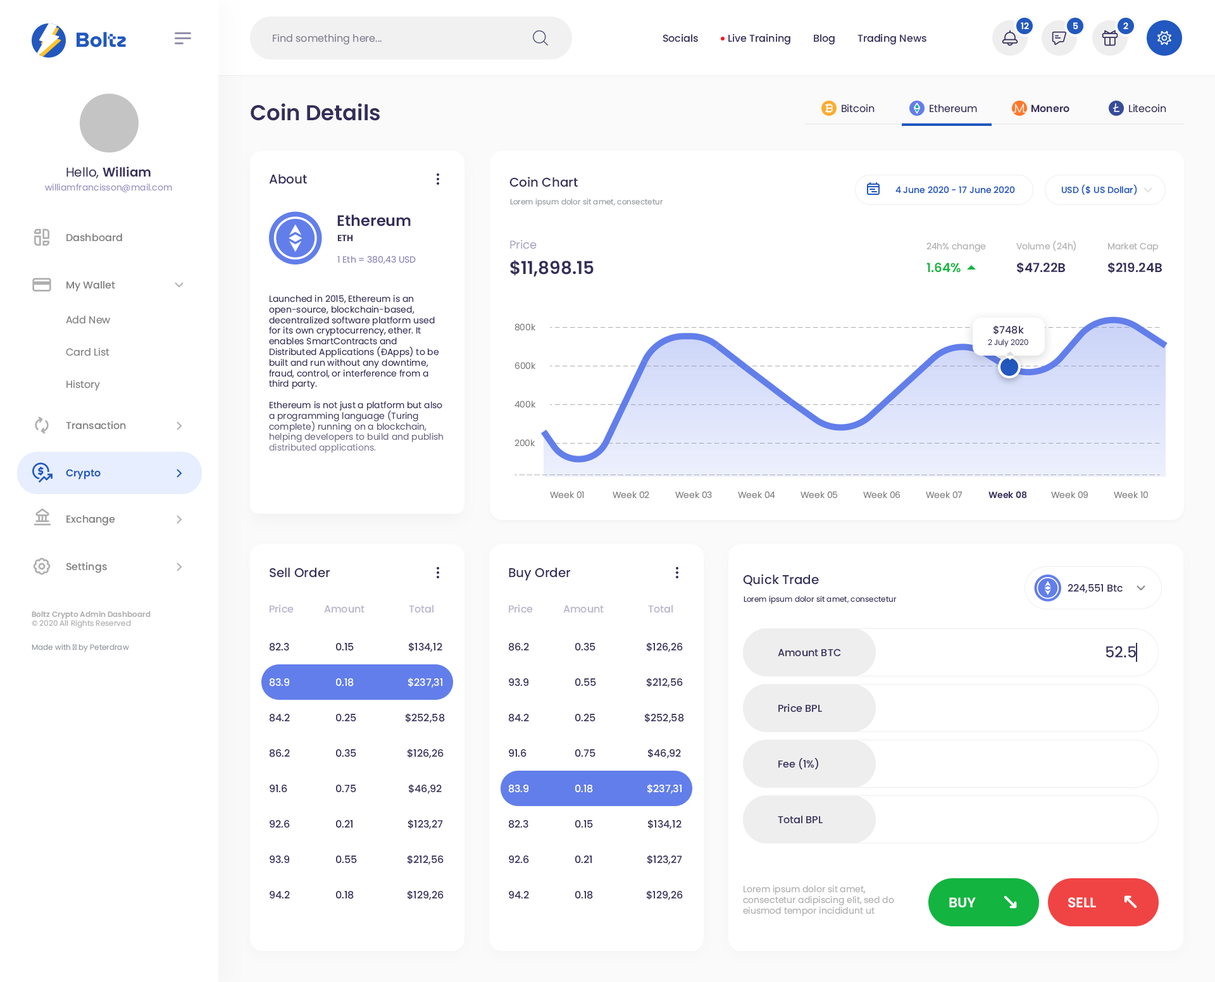
<style>
.page{position:relative;width:1215px;height:982px;background:#ffffff}
.page>*{position:absolute;margin:0}
.t1{font:8.9px "Poppins-SemiBold";color:#ffffff}
.t2{font:10.1px "Poppins-Regular";color:#868295}
.t3{font:10.1px "Poppins-Medium";color:#342e59}
.t4{font:21.5px "Poppins-SemiBold";color:#342e59}
.t5{font:10.1px "Poppins-Regular";color:#342e59}
.t6{font:10.1px "Poppins-SemiBold";color:#342e59}
.t7{font:12.7px "Poppins-SemiBold";color:#342e59}
.t8{font:12.7px "Poppins-Regular";color:#342e59}
.t9{font:12.7px "Poppins-Medium";color:#342e59}
.t10{font:8.9px "Poppins-Regular";color:#9b94c1}
.t11{font:8.9px "Poppins-Medium";color:#2258bf}
.t12{font:7.6px "Poppins-Regular";color:#969ba0}
.t13{font:15.2px "Poppins-SemiBold";color:#342e59}
.t14{font:10.1px "Poppins-Medium";color:#818181}
.t15{font:8.9px "Poppins-SemiBold";color:#342e59}
.t16{font:11.4px "Poppins-Regular";color:#a6a1c0}
.t17{font:8.9px "Poppins-Regular";color:#afafaf}
.t18{font:8.9px "Poppins-Regular";color:#8c84b5}
.t19{font:17.7px "Poppins-SemiBold";color:#342e59}
.t20{font:12.7px "Poppins-SemiBold";color:#13b440}
.t21{font:8.9px "Poppins-Regular";color:#342e59}
.t22{font:10.1px "Poppins-Regular";color:#818181}
.t23{font:8.9px "Poppins-Regular";color:#818181}
.t24{font:7.6px "Poppins-Light";color:#342e59}
.t25{font:10.1px "Poppins-SemiBold";color:#2258bf}
.t26{font:10.1px "Poppins-Medium";color:#b9b5cb}
.t27{font:7.6px "Poppins-Regular";color:#342e59}
.t28{font:7.6px "Poppins-SemiBold";color:#afafaf}
.t29{font:7.6px "Poppins-Regular";color:#afafaf}
.t30{font:15.2px "Poppins-Medium";color:#342e59}
.t31{font:10.1px "Poppins-Medium";color:#fbfbfb}
.t32{font:10.1px "Poppins-Medium";color:#ffffff}
.t33{font:13.9px "Poppins-SemiBold";color:#ffffff}
</style>
<div class="page">
<p class="t1" style="left:1020px;top:22px;width:9px;height:8px">12</p>
<p class="t1" style="left:1073px;top:22px;width:5px;height:8px">5</p>
<p class="t1" style="left:1123px;top:22px;width:5px;height:7px">2</p>
<p class="t2" style="left:273px;top:34px;width:108px;height:11px">Find something here...</p>
<p class="t3" style="left:663px;top:34px;width:35px;height:8px">Socials</p>
<p class="t3" style="left:728px;top:34px;width:62px;height:11px">Live Training</p>
<p class="t3" style="left:814px;top:34px;width:20px;height:11px">Blog</p>
<p class="t3" style="left:857px;top:34px;width:69px;height:11px">Trading News</p>
<p class="t4" style="left:251px;top:103px;width:129px;height:18px">Coin Details</p>
<p class="t5" style="left:841px;top:104px;width:33px;height:9px">Bitcoin</p>
<p class="t5" style="left:929px;top:104px;width:48px;height:9px">Ethereum</p>
<p class="t6" style="left:1031px;top:104px;width:38px;height:9px">Monero</p>
<p class="t5" style="left:1129px;top:104px;width:37px;height:9px">Litecoin</p>
<p class="t7" style="left:66px;top:166px;width:85px;height:12px"><span class="t8">Hello, </span>William</p>
<p class="t9" style="left:269px;top:174px;width:38px;height:10px">About</p>
<p class="t10" style="left:45px;top:183px;width:127px;height:9px">williamfrancisson@mail.com</p>
<p class="t9" style="left:509px;top:176px;width:69px;height:11px">Coin Chart</p>
<p class="t11" style="left:895px;top:186px;width:120px;height:8px">4 June 2020 - 17 June 2020</p>
<p class="t11" style="left:1061px;top:184px;width:76px;height:11px">USD ($ US Dollar)</p>
<p class="t12" style="left:510px;top:198px;width:153px;height:9px">Lorem ipsum dolor sit amet, consectetur</p>
<p class="t13" style="left:337px;top:214px;width:74px;height:12px">Ethereum</p>
<p class="t14" style="left:66px;top:233px;width:56px;height:9px">Dashboard</p>
<p class="t15" style="left:337px;top:235px;width:16px;height:7px">ETH</p>
<p class="t16" style="left:510px;top:240px;width:26px;height:9px">Price</p>
<p class="t17" style="left:926px;top:242px;width:60px;height:10px">24h% change</p>
<p class="t17" style="left:1016px;top:240px;width:59px;height:11px">Volume (24h)</p>
<p class="t17" style="left:1108px;top:242px;width:50px;height:10px">Market Cap</p>
<p class="t18" style="left:337px;top:256px;width:79px;height:8px">1 Eth = 380,43 USD</p>
<p class="t19" style="left:510px;top:260px;width:83px;height:16px">$11,898.15</p>
<p class="t20" style="left:926px;top:263px;width:34px;height:10px">1.64%</p>
<p class="t7" style="left:1017px;top:262px;width:48px;height:11px">$47.22B</p>
<p class="t7" style="left:1108px;top:262px;width:53px;height:11px">$219.24B</p>
<p class="t14" style="left:66px;top:281px;width:49px;height:11px">My Wallet</p>
<p class="t21" style="left:269px;top:295px;width:174px;height:158px">Launched in 2015, Ethereum is an open-source, blockchain-based, decentralized software platform used for its own cryptocurrency, ether. It enables SmartContracts and Distributed Applications (ĐApps) to be built and run without any downtime, fraud, control, or interference from a third party.<br><br>Ethereum is not just a platform but also a programming language (Turing complete) running on a blockchain, helping developers to build and publish distributed applications.</p>
<p class="t22" style="left:66px;top:316px;width:44px;height:8px">Add New</p>
<p class="t23" style="left:514px;top:323px;width:22px;height:8px">800k</p>
<p class="t3" style="left:993px;top:325px;width:31px;height:10px">$748k</p>
<p class="t24" style="left:987px;top:339px;width:41px;height:8px">2 July 2020</p>
<p class="t22" style="left:66px;top:347px;width:43px;height:9px">Card List</p>
<p class="t23" style="left:514px;top:362px;width:22px;height:7px">600k</p>
<p class="t22" style="left:66px;top:380px;width:34px;height:11px">History</p>
<p class="t23" style="left:514px;top:400px;width:22px;height:8px">400k</p>
<p class="t14" style="left:66px;top:421px;width:60px;height:9px">Transaction</p>
<p class="t23" style="left:514px;top:439px;width:21px;height:8px">200k</p>
<p class="t25" style="left:66px;top:469px;width:35px;height:11px">Crypto</p>
<p class="t23" style="left:550px;top:491px;width:34px;height:7px">Week 01</p>
<p class="t23" style="left:612px;top:491px;width:37px;height:7px">Week 02</p>
<p class="t23" style="left:675px;top:491px;width:37px;height:7px">Week 03</p>
<p class="t23" style="left:738px;top:491px;width:37px;height:7px">Week 04</p>
<p class="t23" style="left:800px;top:491px;width:38px;height:7px">Week 05</p>
<p class="t23" style="left:863px;top:491px;width:37px;height:7px">Week 06</p>
<p class="t23" style="left:925px;top:491px;width:37px;height:7px">Week 07</p>
<p class="t15" style="left:988px;top:491px;width:39px;height:7px">Week 08</p>
<p class="t23" style="left:1051px;top:491px;width:36px;height:7px">Week 09</p>
<p class="t23" style="left:1113px;top:491px;width:35px;height:7px">Week 10</p>
<p class="t14" style="left:66px;top:515px;width:49px;height:11px">Exchange</p>
<p class="t14" style="left:66px;top:562px;width:41px;height:11px">Settings</p>
<p class="t9" style="left:269px;top:567px;width:61px;height:11px">Sell Order</p>
<p class="t9" style="left:509px;top:567px;width:61px;height:14px">Buy Order</p>
<p class="t9" style="left:743px;top:574px;width:76px;height:12px">Quick Trade</p>
<p class="t3" style="left:1067px;top:584px;width:55px;height:9px">224,551 Btc</p>
<p class="t26" style="left:269px;top:604px;width:25px;height:9px">Price</p>
<p class="t26" style="left:324px;top:605px;width:40px;height:8px">Amount</p>
<p class="t26" style="left:409px;top:605px;width:24px;height:8px">Total</p>
<p class="t26" style="left:509px;top:604px;width:24px;height:9px">Price</p>
<p class="t26" style="left:563px;top:605px;width:40px;height:8px">Amount</p>
<p class="t26" style="left:648px;top:605px;width:24px;height:8px">Total</p>
<p class="t27" style="left:743px;top:595px;width:153px;height:9px">Lorem ipsum dolor sit amet, consectetur</p>
<p class="t28" style="left:32px;top:610px;width:119px;height:18px">Boltz Crypto Admin Dashboard<br><span class="t29">© 2020 All Rights Reserved</span></p>
<p class="t12" style="left:32px;top:643px;width:97px;height:9px">Made with ♥ by Peterdraw</p>
<p class="t3" style="left:269px;top:643px;width:20px;height:8px">82.3</p>
<p class="t3" style="left:336px;top:643px;width:18px;height:7px">0.15</p>
<p class="t3" style="left:409px;top:642px;width:33px;height:10px">$134,12</p>
<p class="t3" style="left:509px;top:643px;width:20px;height:8px">86.2</p>
<p class="t3" style="left:575px;top:643px;width:20px;height:7px">0.35</p>
<p class="t3" style="left:647px;top:642px;width:36px;height:10px">$126,26</p>
<p class="t3" style="left:777px;top:648px;width:64px;height:9px">Amount BTC</p>
<p class="t30" style="left:1105px;top:646px;width:30px;height:12px">52.5</p>
<p class="t31" style="left:408px;top:678px;width:34px;height:10px">$237,31</p>
<p class="t3" style="left:647px;top:678px;width:36px;height:10px">$212,56</p>
<p class="t31" style="left:269px;top:678px;width:20px;height:8px">83.9</p>
<p class="t31" style="left:336px;top:678px;width:18px;height:8px">0.18</p>
<p class="t3" style="left:509px;top:678px;width:19px;height:8px">93.9</p>
<p class="t3" style="left:575px;top:678px;width:21px;height:8px">0.55</p>
<p class="t3" style="left:269px;top:714px;width:21px;height:8px">84.2</p>
<p class="t3" style="left:336px;top:714px;width:20px;height:7px">0.25</p>
<p class="t3" style="left:405px;top:713px;width:40px;height:10px">$252,58</p>
<p class="t3" style="left:509px;top:714px;width:20px;height:8px">84.2</p>
<p class="t3" style="left:575px;top:714px;width:20px;height:7px">0.25</p>
<p class="t3" style="left:645px;top:713px;width:39px;height:10px">$252,58</p>
<p class="t3" style="left:778px;top:703px;width:44px;height:9px">Price BPL</p>
<p class="t3" style="left:269px;top:749px;width:21px;height:8px">86.2</p>
<p class="t3" style="left:336px;top:749px;width:20px;height:8px">0.35</p>
<p class="t3" style="left:407px;top:748px;width:36px;height:10px">$126,26</p>
<p class="t3" style="left:509px;top:749px;width:17px;height:8px">91.6</p>
<p class="t3" style="left:575px;top:749px;width:20px;height:8px">0.75</p>
<p class="t3" style="left:648px;top:748px;width:33px;height:10px">$46,92</p>
<p class="t3" style="left:778px;top:758px;width:40px;height:11px">Fee (1%)</p>
<p class="t3" style="left:269px;top:784px;width:18px;height:8px">91.6</p>
<p class="t3" style="left:336px;top:784px;width:20px;height:8px">0.75</p>
<p class="t3" style="left:409px;top:784px;width:33px;height:10px">$46,92</p>
<p class="t32" style="left:509px;top:784px;width:19px;height:9px">83.9</p>
<p class="t32" style="left:575px;top:784px;width:18px;height:9px">0.18</p>
<p class="t32" style="left:647px;top:784px;width:34px;height:10px">$237,31</p>
<p class="t3" style="left:269px;top:820px;width:21px;height:7px">92.6</p>
<p class="t3" style="left:336px;top:820px;width:16px;height:7px">0.21</p>
<p class="t3" style="left:408px;top:819px;width:35px;height:10px">$123,27</p>
<p class="t3" style="left:509px;top:820px;width:19px;height:8px">82.3</p>
<p class="t3" style="left:575px;top:820px;width:18px;height:7px">0.15</p>
<p class="t3" style="left:648px;top:819px;width:33px;height:10px">$134,12</p>
<p class="t3" style="left:777px;top:815px;width:45px;height:9px">Total BPL</p>
<p class="t3" style="left:269px;top:855px;width:20px;height:8px">93.9</p>
<p class="t3" style="left:336px;top:855px;width:21px;height:8px">0.55</p>
<p class="t3" style="left:407px;top:855px;width:36px;height:10px">$212,56</p>
<p class="t3" style="left:509px;top:855px;width:20px;height:8px">92.6</p>
<p class="t3" style="left:575px;top:855px;width:16px;height:8px">0.21</p>
<p class="t3" style="left:647px;top:855px;width:35px;height:10px">$123,27</p>
<p class="t3" style="left:269px;top:891px;width:21px;height:7px">94.2</p>
<p class="t3" style="left:336px;top:891px;width:18px;height:8px">0.18</p>
<p class="t3" style="left:407px;top:890px;width:36px;height:10px">$129,26</p>
<p class="t3" style="left:509px;top:891px;width:20px;height:7px">94.2</p>
<p class="t3" style="left:575px;top:891px;width:18px;height:8px">0.18</p>
<p class="t3" style="left:647px;top:890px;width:36px;height:10px">$129,26</p>
<p class="t17" style="left:743px;top:885px;width:151px;height:31px">Lorem ipsum dolor sit amet, consectetur adipiscing elit, sed do eiusmod tempor incididunt ut</p>
<p class="t33" style="left:949px;top:897px;width:26px;height:11px">BUY</p>
<p class="t33" style="left:1068px;top:897px;width:28px;height:11px">SELL</p>
</div>
